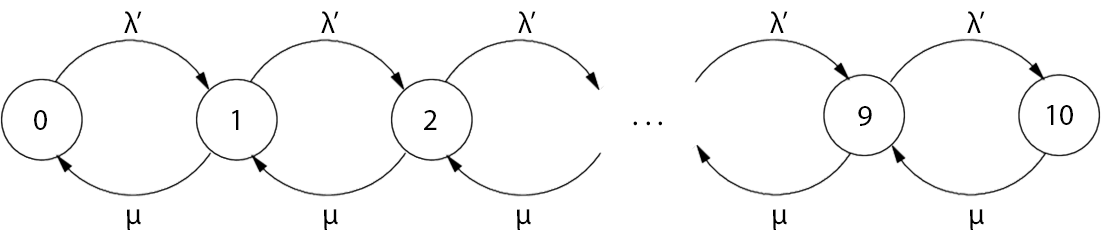
<style>
.page{position:relative;width:1101px;height:243px;background:#ffffff}
.page>*{position:absolute;margin:0}
.t1{font:30px "MyriadPro-Regular";color:#000000}
</style>
<div class="page">
<p class="t1" style="left:124px;top:11px;width:18px;height:22px">λ’</p>
<p class="t1" style="left:321px;top:11px;width:18px;height:22px">λ’</p>
<p class="t1" style="left:518px;top:11px;width:18px;height:22px">λ’</p>
<p class="t1" style="left:770px;top:11px;width:18px;height:22px">λ’</p>
<p class="t1" style="left:967px;top:11px;width:18px;height:22px">λ’</p>
<p class="t1" style="left:34px;top:110px;width:13px;height:20px">0</p>
<p class="t1" style="left:232px;top:110px;width:7px;height:20px">1</p>
<p class="t1" style="left:424px;top:110px;width:13px;height:20px">2</p>
<p class="t1" style="left:858px;top:106px;width:14px;height:20px">9</p>
<p class="t1" style="left:1047px;top:105px;width:26px;height:20px">10</p>
<p class="t1" style="left:633px;top:121px;width:29px;height:5px">. . .</p>
<p class="t1" style="left:127px;top:209px;width:14px;height:21px">μ</p>
<p class="t1" style="left:324px;top:209px;width:14px;height:21px">μ</p>
<p class="t1" style="left:517px;top:209px;width:14px;height:21px">μ</p>
<p class="t1" style="left:773px;top:209px;width:14px;height:21px">μ</p>
<p class="t1" style="left:970px;top:209px;width:14px;height:21px">μ</p>
</div>
